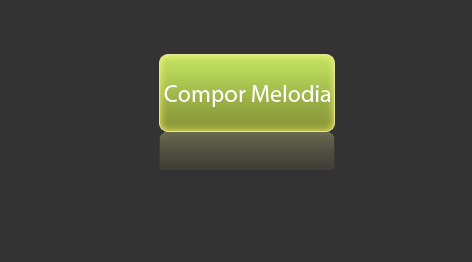
<style>
.page{position:relative;width:472px;height:262px;background:#333333}
.page>*{position:absolute;margin:0}
.t1{font:24px "MyriadPro-Regular";color:#ffffff}
</style>
<div class="page">
<p class="t1" style="left:164px;top:85px;width:167px;height:22px">Compor Melodia</p>
</div>
